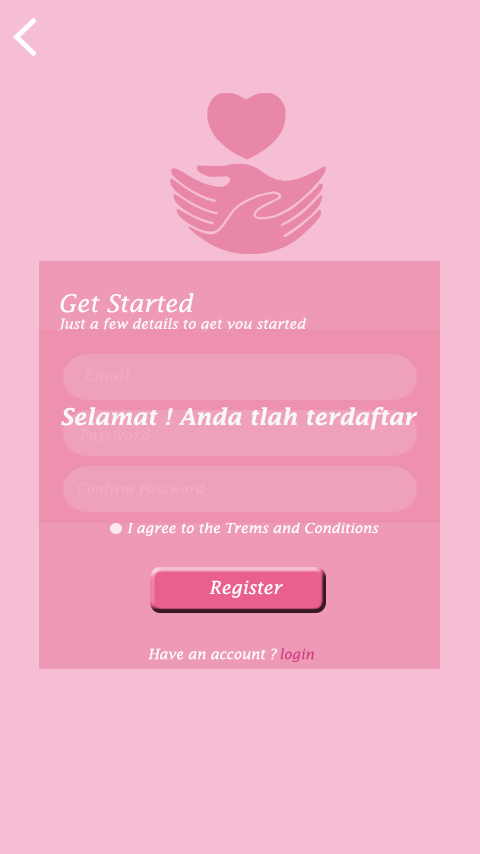
<style>
.page{position:relative;width:480px;height:854px;background:#f5bed5}
.page>*{position:absolute;margin:0}
.t1{font:14px "LucidaFax-Italic";color:#fbf8f9}
.t2{font:24px "LucidaFax-Italic";color:#fcfbfb}
.t3{font:16px "LucidaFax-Italic";color:#f1aac1}
.t4{font:23px "LucidaFax-DemiItalic";color:#f8f8f8}
.t5{font:15.9px "LucidaFax-Italic";color:#f1acc3;scale:0.95 1}
.t6{font:14px "LucidaFax-Italic";color:#f1acc3}
.t7{font:14px "LucidaFax-Italic";color:#fefefe}
.t8{font:18px "LucidaFax-Italic";color:#fefdfd}
.t9{font:14.1px "LucidaFax-Italic";color:#fefefe}
.t10{font:14.1px "LucidaFax-Italic";color:#d14288}
</style>
<div class="page">
<p class="t1" style="left:57px;top:293px;width:249px;height:39px"><span class="t2">Get Started<br></span>Just a few details to get you started</p>
<p class="t3" style="left:84px;top:368px;width:46px;height:14px">Email</p>
<p class="t4" style="left:61px;top:406px;width:357px;height:24px">Selamat ! Anda tlah terdaftar</p>
<p class="t5" style="left:79px;top:428px;width:72px;height:13px">Password</p>
<p class="t6" style="left:77px;top:483px;width:128px;height:14px">Confirm Password</p>
<p class="t7" style="left:127px;top:522px;width:252px;height:14px">I agree to the Trems and Conditions</p>
<p class="t8" style="left:209px;top:580px;width:74px;height:18px">Register</p>
<p class="t9" style="left:148px;top:648px;width:130px;height:12px">Have an account ?</p>
<p class="t10" style="left:280px;top:648px;width:34px;height:14px">login</p>
</div>
